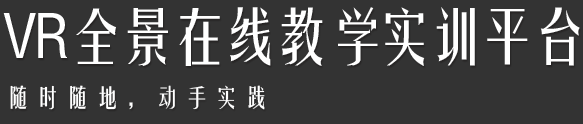
<style>
.page{position:relative;width:583px;height:124px;background:#333333}
.page>*{position:absolute;margin:0}
.t1{font:60px "FZYTK--GBK1-0";letter-spacing:-0.14em;color:#ffffff}
.t2{font:60px "FZYTK--GBK1-0";letter-spacing:-0.06em;color:#ffffff}
.t3{font:24px "FZYTK--GBK1-0";letter-spacing:0.24em;color:#ffffff}
</style>
<div class="page">
<p class="t1" style="left:3px;top:7px;width:577px;height:59px"><span class="t2">VR</span>全景在线教学实训平台</p>
<p class="t3" style="left:10px;top:85px;width:255px;height:25px">随时随地，动手实践</p>
</div>
